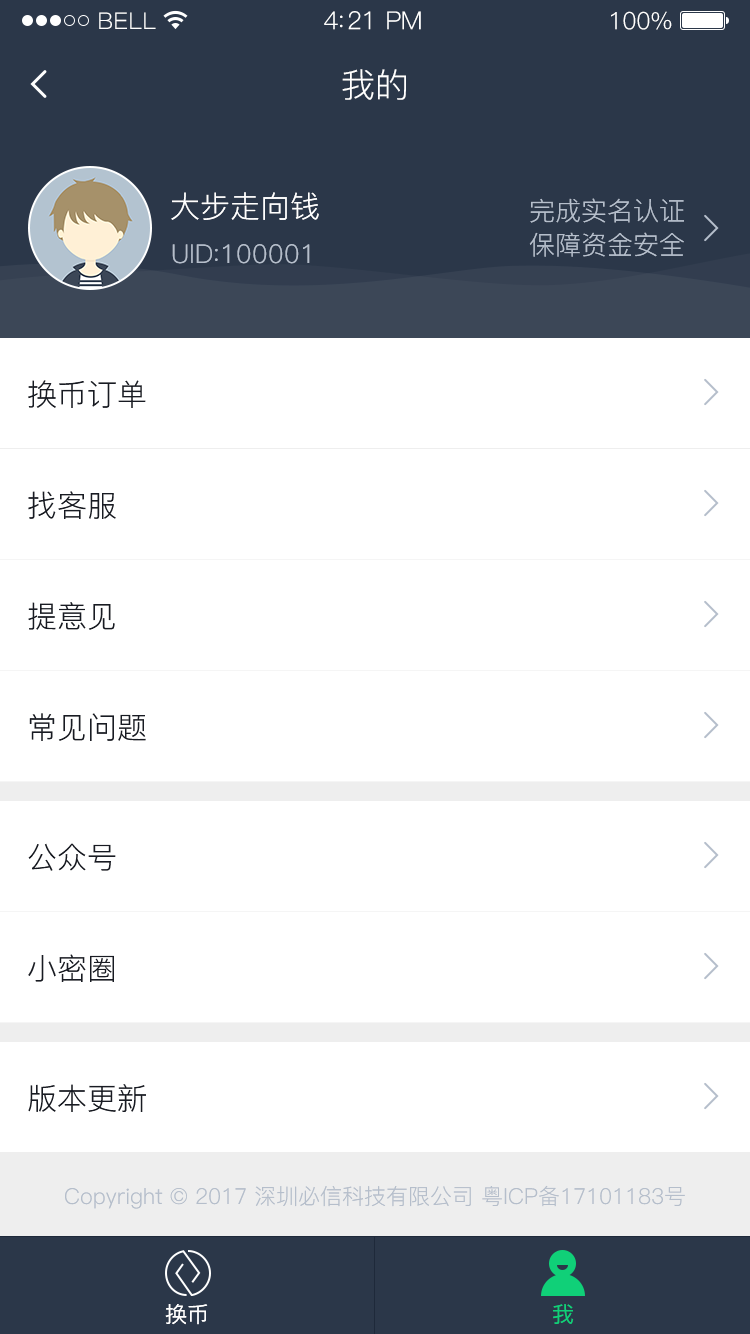
<style>
.page{position:relative;width:750px;height:1334px;background:#ffffff}
.page>*{position:absolute;margin:0}
.t1{font:23px "PingFang-SC-Regular";letter-spacing:0.02em;color:#ffffff}
.t2{font:25px "PingFang-SC-Regular";letter-spacing:-0.02em;color:#ffffff}
.t3{font:24px "PingFang-SC-Regular";letter-spacing:-0.02em;color:#ffffff}
.t4{font:34px "PingFang-SC-Regular";color:#ffffff}
.t5{font:30px "PingFang-SC-Regular";color:#ffffff}
.t6{font:26px/34px "PingFang-SC-Regular";color:#b5becb}
.t7{font:26px "PingFang-SC-Regular";color:#b5becb}
.t8{font:30px "PingFang-SC-Regular";color:#181b23}
.t9{font:22px "PingFang-SC-Regular";color:#b5becb}
.t10{font:22px "PingFang-SC-Medium";color:#ffffff}
.t11{font:22px "PingFang-SC-Medium";color:#10d078}
</style>
<div class="page">
<p class="t1" style="left:99px;top:12px;width:57px;height:17px">BELL</p>
<p class="t2" style="left:324px;top:11px;width:97px;height:19px">4:21 PM</p>
<p class="t3" style="left:611px;top:11px;width:61px;height:19px">100%</p>
<p class="t4" style="left:342px;top:69px;width:64px;height:31px">我的</p>
<p class="t5" style="left:171px;top:192px;width:148px;height:28px">大步走向钱</p>
<p class="t6" style="left:529px;top:198px;width:155px;height:59px;text-align:right">完成实名认证<br>保障资金安全</p>
<p class="t7" style="left:172px;top:244px;width:138px;height:20px">UID:100001</p>
<p class="t8" style="left:28px;top:380px;width:118px;height:28px">换币订单</p>
<p class="t8" style="left:28px;top:491px;width:88px;height:28px">找客服</p>
<p class="t8" style="left:28px;top:602px;width:87px;height:28px">提意见</p>
<p class="t8" style="left:29px;top:713px;width:117px;height:28px">常见问题</p>
<p class="t8" style="left:28px;top:843px;width:88px;height:28px">公众号</p>
<p class="t8" style="left:28px;top:954px;width:86px;height:28px">小密圈</p>
<p class="t8" style="left:28px;top:1084px;width:118px;height:28px">版本更新</p>
<p class="t9" style="left:65px;top:1185px;width:620px;height:24px">Copyright © 2017 深圳必信科技有限公司 粤ICP备17101183号</p>
<p class="t10" style="left:165px;top:1304px;width:43px;height:21px">换币</p>
<p class="t11" style="left:553px;top:1304px;width:21px;height:20px">我</p>
</div>
